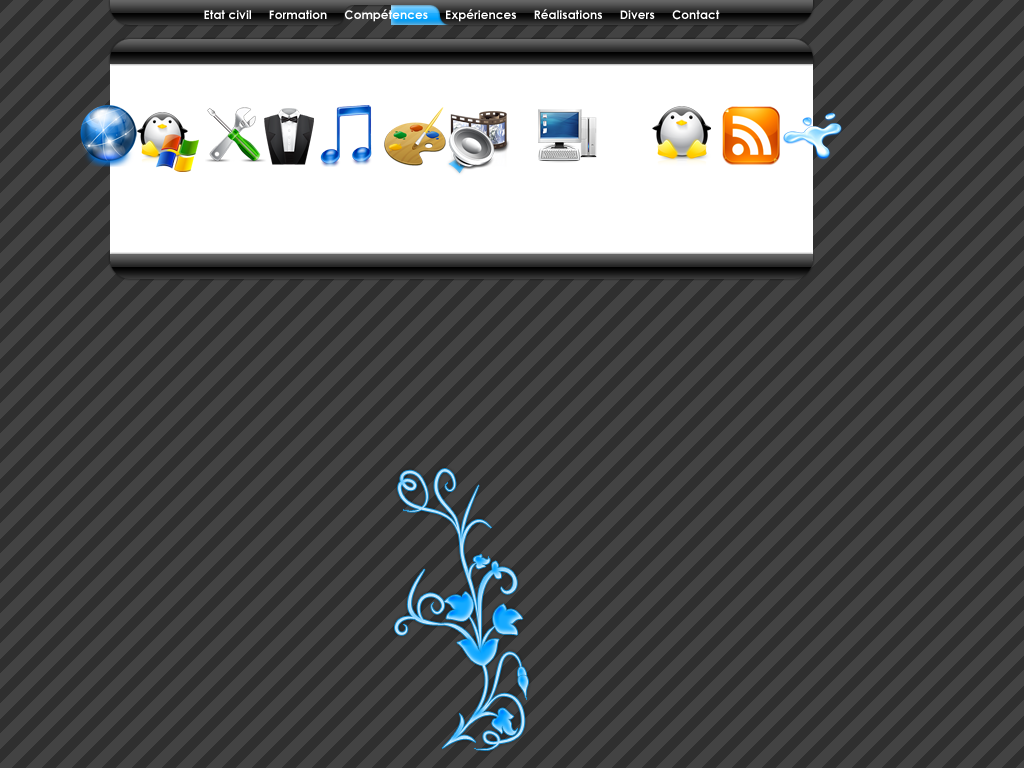
<style>
.page{position:relative;width:1024px;height:768px;background:#434343}
.page>*{position:absolute;margin:0}
.t1{font:12px "CenturyGothic-Bold";letter-spacing:0.005em;color:#ffffff}
</style>
<div class="page">
<p class="t1" style="left:204px;top:9px;width:516px;height:13px">Etat civil     Formation     Compétences     Expériences     Réalisations     Divers     Contact</p>
</div>
